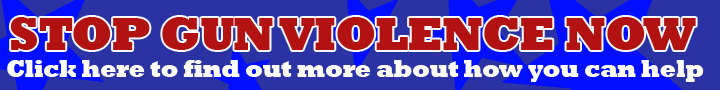
<style>
.page{position:relative;width:720px;height:90px;background:#2a32a4}
.page>*{position:absolute;margin:0}
.t1{font:48px "Rockwell-ExtraBold";letter-spacing:-0.025em;color:#b31212}
.t2{font:24px "Rockwell-ExtraBold";letter-spacing:-0.025em;color:#fffdfd}
</style>
<div class="page">
<p class="t1" style="left:10px;top:17px;width:686px;height:33px">STOP GUN VIOLENCE NOW</p>
<p class="t2" style="left:7px;top:60px;width:697px;height:22px">Click here to find out more about how you can help</p>
</div>
